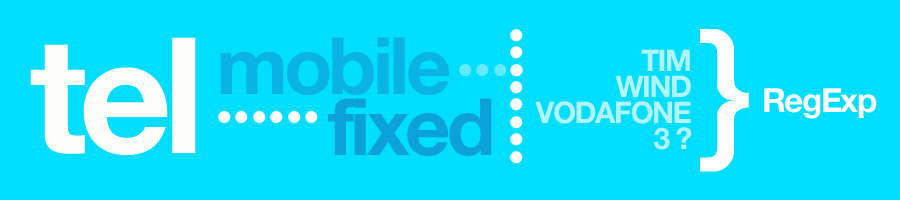
<style>
.page{position:relative;width:900px;height:200px;background:#00deff}
.page>*{position:absolute;margin:0}
.t1{font:62.6px "Georgia-Bold";letter-spacing:-0.05em;color:#fdfdfa}
.t2{font:154.7px "HelveticaNeue-Medium";letter-spacing:-0.05em;color:#ffffff}
.t3{font:161.2px "HelveticaNeue-Bold";letter-spacing:-0.05em;color:#fdfdfa}
.t4{font:79.2px "HelveticaNeue-Bold";letter-spacing:-0.05em;color:#09b4e5}
.t5{font:29.8px/26.1px "HelveticaNeue-Bold";letter-spacing:-0.05em;color:#b2f4fb;text-transform:uppercase}
.t6{font:62.6px "Georgia-Bold";letter-spacing:-0.05em;color:#65eafd}
.t7{font:33.3px "HelveticaNeue-Bold";letter-spacing:-0.05em;color:#fefefe}
.t8{font:79.2px "HelveticaNeue-Bold";letter-spacing:-0.05em;color:#0da1d9}
</style>
<div class="page">
<p class="t1" style="left:510px;top:29px;width:13px;height:135px;rotate:90deg">........</p>
<p class="t2" style="left:700px;top:29px;width:49px;height:143px">}</p>
<p class="t3" style="left:30px;top:37px;width:166px;height:118px">tel</p>
<p class="t4" style="left:220px;top:37px;width:230px;height:58px">mobile</p>
<p class="t5" style="left:535px;top:49px;width:157px;height:101px;text-align:right">TIM<br>Wind<br>Vodafone<br>3 ?</p>
<p class="t6" style="left:459px;top:64px;width:65px;height:12px">....</p>
<p class="t7" style="left:764px;top:88px;width:113px;height:31px">RegExp</p>
<p class="t8" style="left:328px;top:98px;width:164px;height:58px">fixed</p>
<p class="t1" style="left:218px;top:111px;width:100px;height:12px">......</p>
</div>
